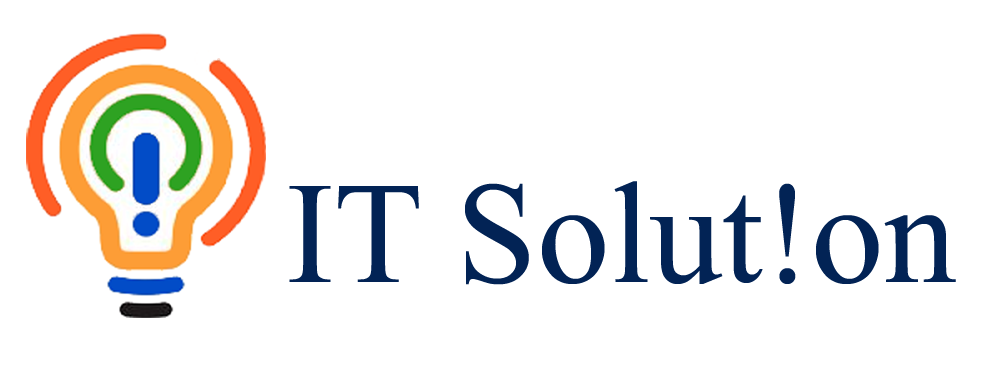
<style>
.page{position:relative;width:1004px;height:390px;background:#ffffff}
.page>*{position:absolute;margin:0}
.t1{font:145px "TimesNewRomanPSMT";color:#022355}
</style>
<div class="page">
<p class="t1" style="left:289px;top:181px;width:667px;height:104px">IT Solut!on</p>
</div>
